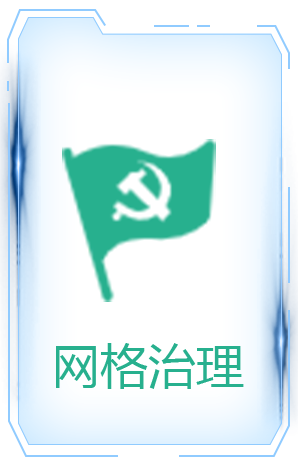
<style>
.page{position:relative;width:298px;height:467px;background:#ffffff}
.page>*{position:absolute;margin:0}
.t1{font:48px "MicrosoftYaHei";color:#27b08e}
</style>
<div class="page">
<p class="t1" style="left:56px;top:343px;width:188px;height:46px">网格治理</p>
</div>
